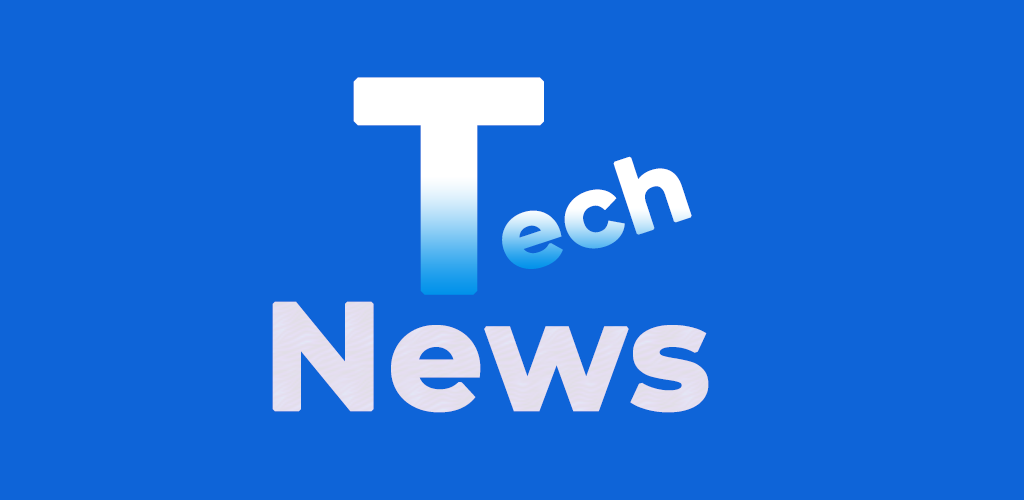
<style>
.page{position:relative;width:1024px;height:500px;background:#0e64d8}
.page>*{position:absolute;margin:0}
.t1{font:298.4px "Montserrat-Bold";letter-spacing:0.004em;color:#ffffff;font-weight:bold}
.t2{font:99.5px "Montserrat-Bold";letter-spacing:0.004em;font-weight:bold}
.t3{font:150px "Montserrat-Bold";letter-spacing:0.004em;color:#e4deef;font-weight:bold}
</style>
<div class="page">
<p class="t1" style="left:353px;top:77px;width:191px;height:218px">T</p>
<p class="t2" style="left:502px;top:156px;width:190px;height:113px;rotate:-18deg">ech</p>
<p class="t3" style="left:272px;top:301px;width:437px;height:112px">News</p>
</div>
